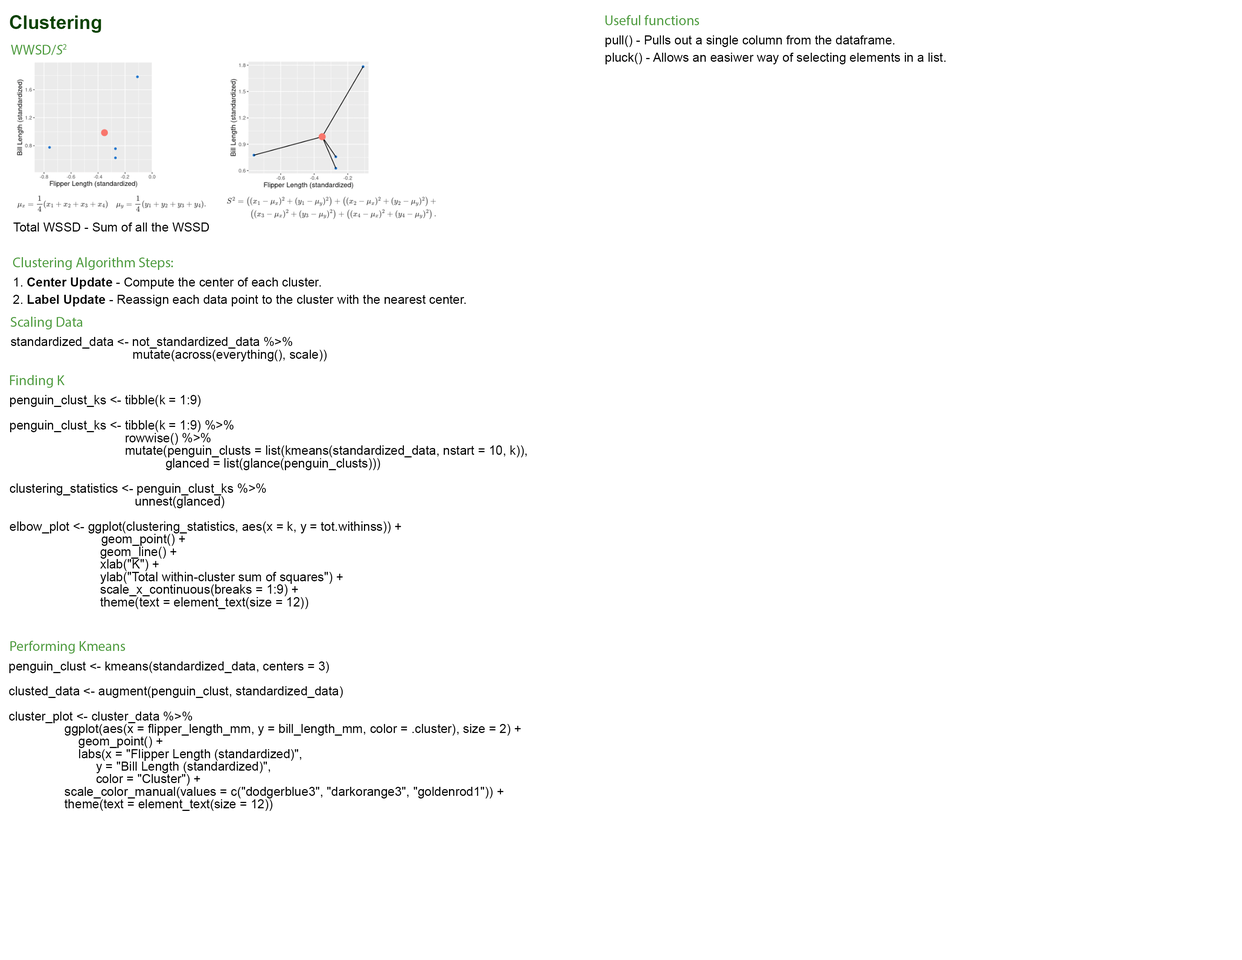
<style>
.page{position:relative;width:1242px;height:960px;background:#ffffff}
.page>*{position:absolute;margin:0}
.t1{font:18.8px "Arial-BoldMT";color:#0b4300}
.t2{font:14.2px "MyriadPro-Regular";color:#4d9c3d}
.t3{font:12.6px/17.3px "ArialMT";color:#000000}
.t4{font:14.1px "MyriadPro-Regular";color:#4d9c3d}
.t5{font:14.1px "MyriadPro-It";color:#4d9c3d}
.t6{font:12.5px "ArialMT";color:#000000}
.t7{font:12.5px/17.3px "ArialMT";color:#000000}
.t8{font:12.5px/17.3px "Arial-BoldMT";color:#000000}
.t9{font:12.6px/12.6px "ArialMT";color:#000000}
.t10{font:12.5px/12.5px "ArialMT";color:#000000}
</style>
<div class="page">
<p class="t1" style="left:10px;top:15px;width:91px;height:18px">Clustering</p>
<p class="t2" style="left:605px;top:15px;width:94px;height:10px">Useful functions</p>
<p class="t3" style="left:606px;top:35px;width:340px;height:29px">pull() - Pulls out a single column from the dataframe.<br>pluck() - Allows an easiwer way of selecting elements in a list.</p>
<p class="t4" style="left:11px;top:44px;width:56px;height:11px">WWSD/<span class="t5">S</span>2</p>
<p class="t6" style="left:13px;top:222px;width:196px;height:10px">Total WSSD - Sum of all the WSSD</p>
<p class="t4" style="left:13px;top:257px;width:160px;height:13px">Clustering Algorithm Steps:</p>
<p class="t7" style="left:13px;top:277px;width:453px;height:29px">1. <span class="t8">Center Update </span>- Compute the center of each cluster.<br>2. <span class="t8">Label Update</span> - Reassign each data point to the cluster with the nearest center.</p>
<p class="t2" style="left:11px;top:317px;width:71px;height:12px">Scaling Data</p>
<p class="t9" style="left:11px;top:337px;width:316px;height:24px">standardized_data &lt;- not_standardized_data %&gt;%<br>                                   mutate(across(everything(), scale))</p>
<p class="t2" style="left:10px;top:375px;width:55px;height:13px">Finding K</p>
<p class="t9" style="left:10px;top:395px;width:517px;height:214px">penguin_clust_ks &lt;- tibble(k = 1:9)<br><br>penguin_clust_ks &lt;- tibble(k = 1:9) %&gt;%<br>                         rowwise() %&gt;%<br>                         mutate(penguin_clusts = list(kmeans(standardized_data, nstart = 10, k)),<br>                                     glanced = list(glance(penguin_clusts)))<br><br>clustering_statistics &lt;- penguin_clust_ks %&gt;%<br>          unnest(glanced)<br><br>elbow_plot &lt;- ggplot(clustering_statistics, aes(x = k, y = tot.withinss)) +<br>                           geom_point() +<br>                          geom_line() +<br>                          xlab("K") +<br>                          ylab("Total within-cluster sum of squares") +<br>                          scale_x_continuous(breaks = 1:9) + <br>                          theme(text = element_text(size = 12))</p>
<p class="t2" style="left:10px;top:641px;width:115px;height:12px">Performing Kmeans</p>
<p class="t10" style="left:9px;top:661px;width:512px;height:150px">penguin_clust &lt;- kmeans(standardized_data, centers = 3)<br><br>clusted_data &lt;- augment(penguin_clust, standardized_data)<br><br>cluster_plot &lt;- cluster_data %&gt;%<br>                ggplot(aes(x = flipper_length_mm, y = bill_length_mm, color = .cluster), size = 2) +<br>                    geom_point() +<br>                    labs(x = "Flipper Length (standardized)", <br>                         y = "Bill Length (standardized)", <br>                         color = "Cluster") + <br>                scale_color_manual(values = c("dodgerblue3", "darkorange3", "goldenrod1")) + <br>                theme(text = element_text(size = 12))</p>
</div>
